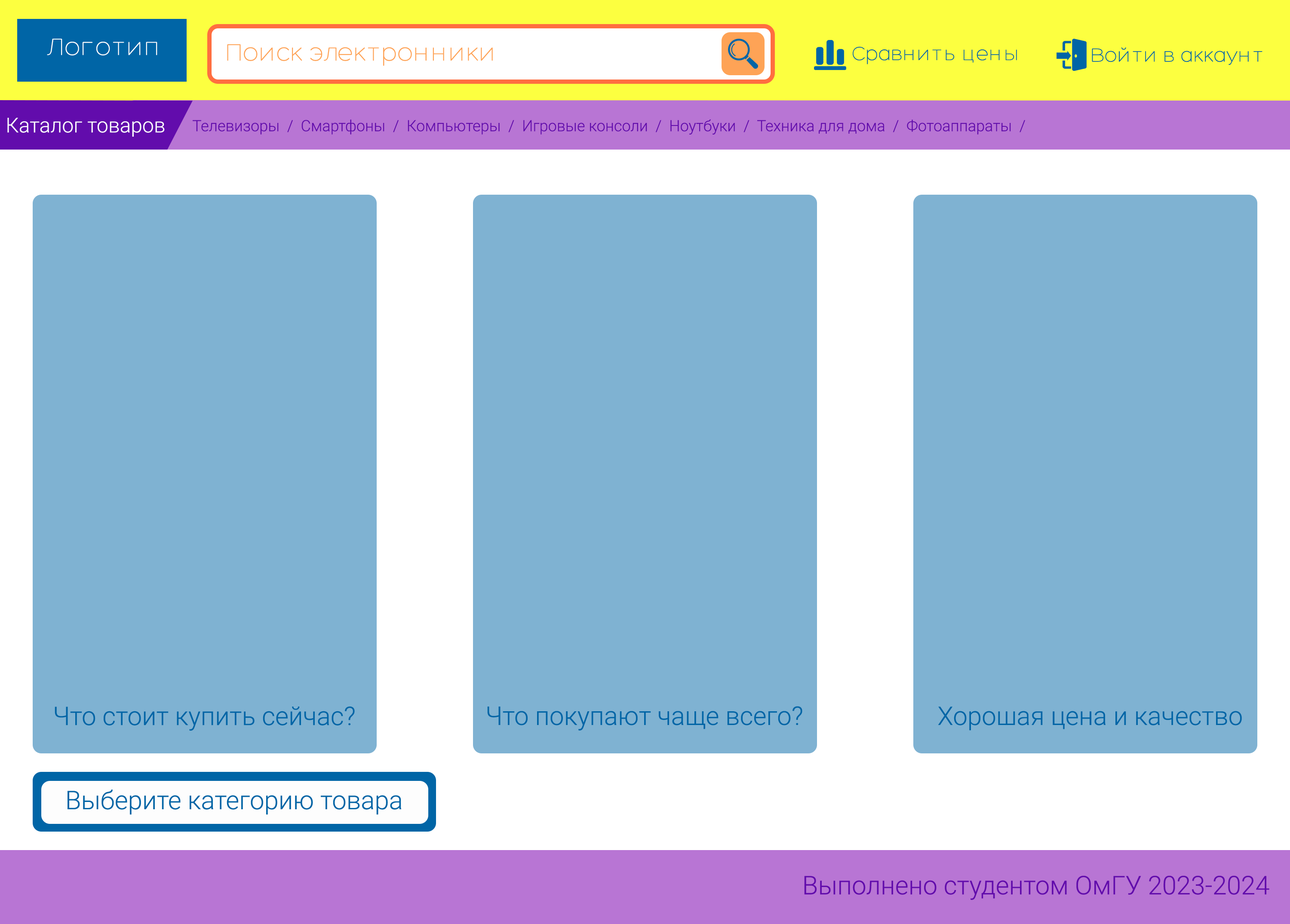
<style>
.page{position:relative;width:1290px;height:924px;background:#7fb2d2}
.page>*{position:absolute;margin:0}
.t1{font:25.8px "Hero-Light";color:#ffffff}
.t2{font:25.8px "Hero-Light";color:#fea356}
.t3{font:20.6px "Hero-Light";color:#0065a6}
.t4{font:20.6px "Roboto-Light";color:#ffffff}
.t5{font:15.5px "Roboto-Light";color:#620cac}
.t6{font:25.8px "Roboto-Light";color:#0065a6}
.t7{font:25.8px "Roboto-Light";color:#620cac}
</style>
<div class="page">
<p class="t1" style="left:47px;top:39px;width:110px;height:16px">Логотип</p>
<p class="t2" style="left:227px;top:44px;width:266px;height:22px">Поиск электронники</p>
<p class="t3" style="left:853px;top:46px;width:164px;height:18px">Сравнить цены</p>
<p class="t3" style="left:1092px;top:47px;width:170px;height:18px">Войти в аккаунт</p>
<p class="t4" style="left:7px;top:118px;width:158px;height:19px">Каталог товаров</p>
<p class="t5" style="left:193px;top:119px;width:832px;height:16px">Телевизоры  /  Смартфоны  /  Компьютеры  /  Игровые консоли  /  Ноутбуки  /  Техника для дома  /  Фотоаппараты  /</p>
<p class="t6" style="left:55px;top:706px;width:300px;height:25px">Что стоит купить сейчас?</p>
<p class="t6" style="left:487px;top:706px;width:315px;height:25px">Что покупают чаще всего?</p>
<p class="t6" style="left:938px;top:707px;width:304px;height:24px">Хорошая цена и качество</p>
<p class="t6" style="left:68px;top:790px;width:334px;height:25px">Выберите категорию товара</p>
<p class="t7" style="left:804px;top:876px;width:465px;height:24px">Выполнено студентом ОмГУ 2023-2024</p>
</div>
